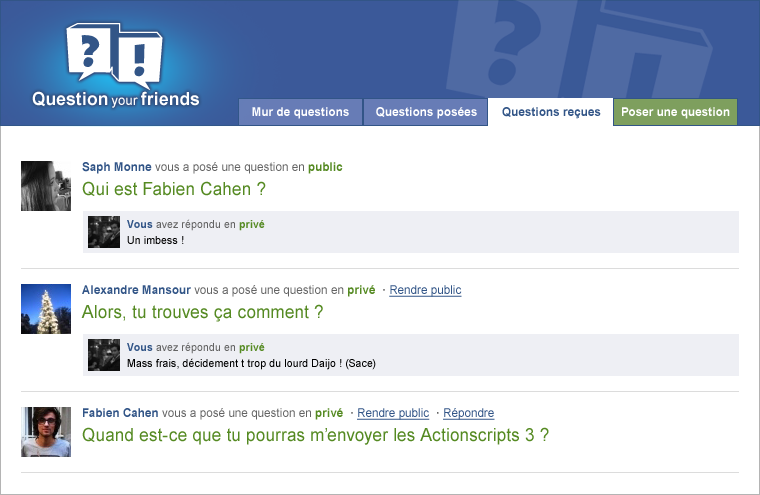
<style>
.page{position:relative;width:760px;height:495px;background:#ffffff}
.page>*{position:absolute;margin:0}
.t1{font:18px "Arial-BoldMT";letter-spacing:0.022em;color:#ffffff;scale:0.94 1}
.t2{font:14px "ArialMT";letter-spacing:0.022em;color:#ffffff;scale:0.94 1}
.t3{font:12px "Arial-BoldMT";letter-spacing:0.015em;color:#ffffff;scale:0.95 1}
.t4{font:12px "Arial-BoldMT";letter-spacing:0.015em;color:#325587;scale:0.95 1}
.t5{font:12px "ArialMT";letter-spacing:0.015em;color:#646464;scale:0.95 1}
.t6{font:12px "Arial-BoldMT";letter-spacing:0.015em;color:#558a22;scale:0.95 1}
.t7{font:18px "ArialMT";letter-spacing:0.015em;color:#558a22;scale:0.95 1}
.t8{font:11px/16px "ArialMT";letter-spacing:0.015em;color:#646464;scale:0.95 1}
.t9{font:11px/16px "Arial-BoldMT";letter-spacing:0.015em;color:#325587;scale:0.95 1}
.t10{font:11px/16px "Arial-BoldMT";letter-spacing:0.015em;color:#558a22;scale:0.95 1}
.t11{font:11px/16px "ArialMT";letter-spacing:0.015em;color:#000000;scale:0.95 1}
.t12{font:12px "Arial-BoldMT";letter-spacing:0.015em;color:#646464;scale:0.95 1}
.t13{font:12px "ArialMT";letter-spacing:0.015em;color:#325587;text-decoration:underline;scale:0.95 1}
</style>
<div class="page">
<p class="t1" style="left:32px;top:91px;width:167px;height:17px">Question <span class="t2">your </span>friends</p>
<p class="t3" style="left:252px;top:107px;width:97px;height:12px">Mur de questions</p>
<p class="t3" style="left:376px;top:107px;width:101px;height:12px">Questions posées</p>
<p class="t4" style="left:502px;top:107px;width:99px;height:12px">Questions reçues</p>
<p class="t3" style="left:622px;top:107px;width:108px;height:12px">Poser une question</p>
<p class="t5" style="left:82px;top:162px;width:261px;height:12px"><span class="t4">Saph Monne</span> vous a posé une question en <span class="t6">public</span></p>
<p class="t7" style="left:82px;top:181px;width:184px;height:15px">Qui est Fabien Cahen ?</p>
<p class="t8" style="left:127px;top:219px;width:138px;height:25px"><span class="t9">Vous </span>avez répondu en <span class="t10">privé<br></span><span class="t11">Un imbess !</span></p>
<p class="t5" style="left:82px;top:285px;width:380px;height:12px"><span class="t4">Alexandre Mansour </span>vous a posé une question en <span class="t6">privé </span><span class="t12"> · </span><span class="t13">Rendre public</span></p>
<p class="t7" style="left:81px;top:304px;width:242px;height:18px">Alors, tu trouves ça comment ?</p>
<p class="t11" style="left:127px;top:342px;width:249px;height:28px"><span class="t9">Vous </span><span class="t8">avez répondu en </span><span class="t10">privé<br></span>Mass frais, décidement t trop du lourd Daijo ! (Sace)</p>
<p class="t5" style="left:83px;top:408px;width:412px;height:12px"><span class="t4">Fabien Cahen</span> vous a posé une question en <span class="t6">privé </span><span class="t12"> · </span><span class="t13">Rendre public </span><span class="t12"> · </span><span class="t13">Répondre</span></p>
<p class="t7" style="left:82px;top:427px;width:467px;height:18px">Quand est-ce que tu pourras m’envoyer les Actionscripts 3 ?</p>
</div>
